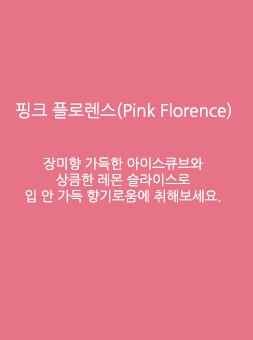
<style>
.page{position:relative;width:253px;height:340px;background:#e77387}
.page>*{position:absolute;margin:0}
.t1{font:17px "NanumGothic";color:#ffffff}
.t2{font:13.5px "NanumGothic";color:#ffffff}
</style>
<div class="page">
<p class="t1" style="left:16px;top:102px;width:215px;height:18px">핑크 플로렌스(Pink Florence)</p>
<p class="t2" style="left:25px;top:157px;width:196px;height:46px;text-align:center">장미향 가득한 아이스큐브와<br>상큼한 레몬 슬라이스로<br>입 안 가득 향기로움에 취해보세요.</p>
</div>
